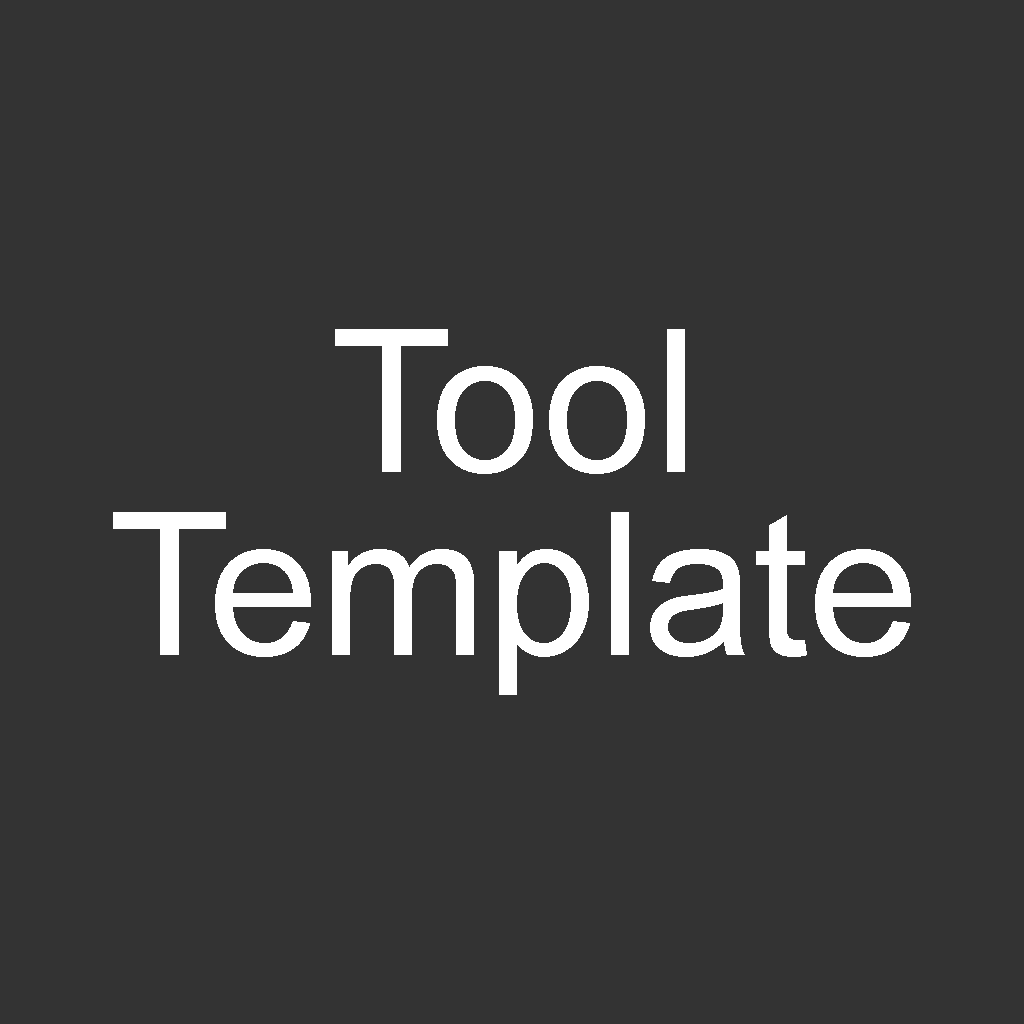
<style>
.page{position:relative;width:1024px;height:1024px;background:#333333}
.page>*{position:absolute;margin:0}
.t1{font:200px/183px "ArialMT";color:#ffffff}
</style>
<div class="page">
<p class="t1" style="left:113px;top:329px;width:798px;height:366px;text-align:center">Tool<br>Template</p>
</div>
